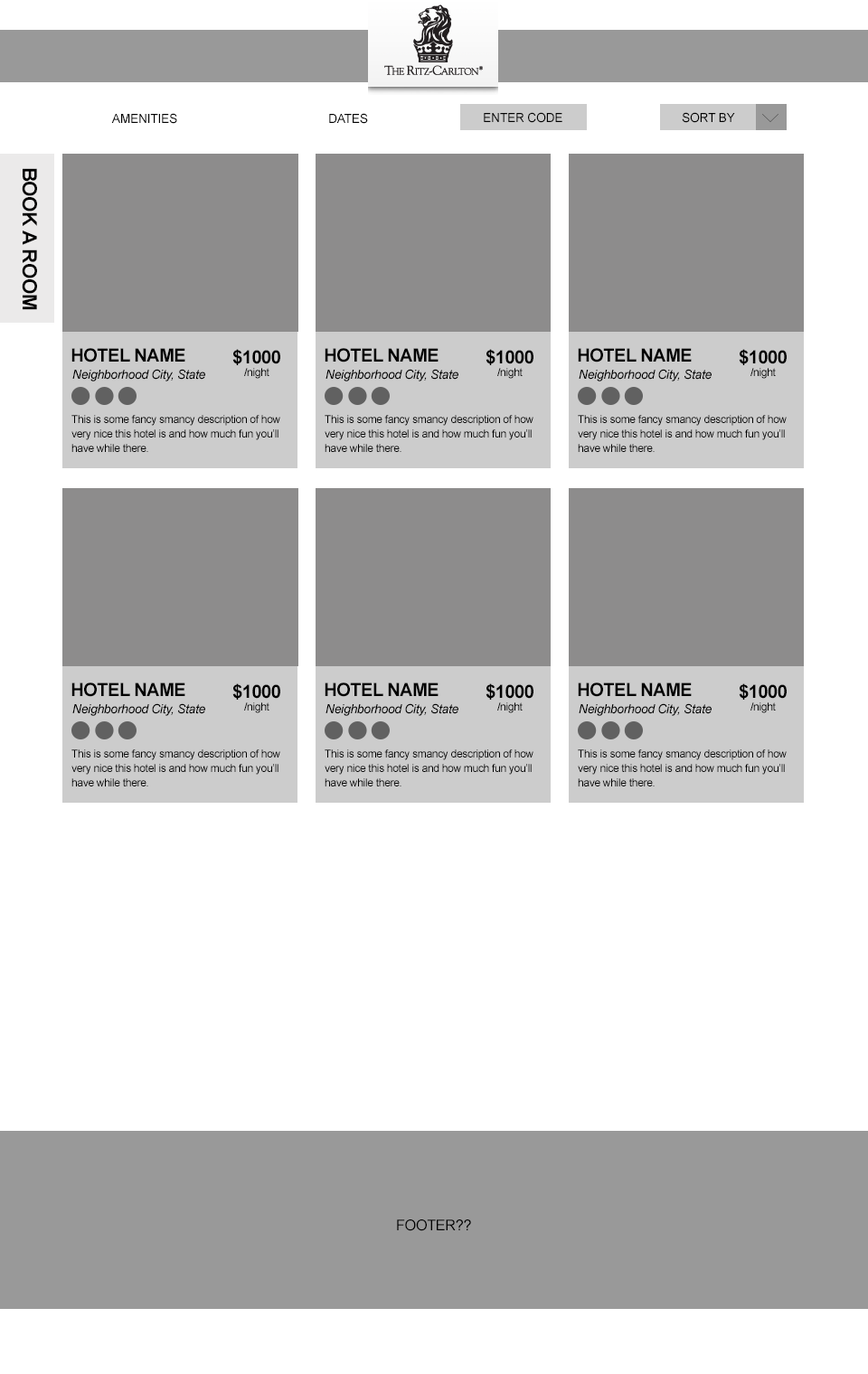
<style>
.page{position:relative;width:868px;height:1374px;background:#ffffff}
.page>*{position:absolute;margin:0}
.t1{font:12.7px "ArialMT";letter-spacing:-0.025em;color:#000000}
.t2{font:19.9px "Arial-BoldMT";letter-spacing:-0.025em;color:#010101}
.t3{font:18.1px "Arial-BoldMT";letter-spacing:-0.025em;color:#000000}
.t4{font:12.7px "Arial-ItalicMT";letter-spacing:-0.025em;color:#000000}
.t5{font:10.8px "ArialMT";letter-spacing:-0.025em;color:#000000}
.t6{font:10.8px/14.8px "ArialMT";letter-spacing:-0.025em;color:#000000}
.t7{font:14.8px "ArialMT";letter-spacing:-0.025em;color:#000000}
</style>
<div class="page">
<p class="t1" style="left:111px;top:113px;width:66px;height:11px">AMENITIES</p>
<p class="t1" style="left:329px;top:113px;width:39px;height:11px">DATES</p>
<p class="t1" style="left:484px;top:112px;width:78px;height:11px">ENTER CODE</p>
<p class="t1" style="left:682px;top:112px;width:53px;height:11px">SORT BY</p>
<p class="t2" style="left:22px;top:168px;width:15px;height:142px;rotate:90deg">BOOK A ROOM</p>
<p class="t3" style="left:71px;top:348px;width:114px;height:14px">HOTEL NAME</p>
<p class="t3" style="left:232px;top:349px;width:48px;height:16px">$1000</p>
<p class="t3" style="left:325px;top:348px;width:113px;height:14px">HOTEL NAME</p>
<p class="t3" style="left:485px;top:349px;width:48px;height:16px">$1000</p>
<p class="t3" style="left:578px;top:348px;width:114px;height:14px">HOTEL NAME</p>
<p class="t3" style="left:739px;top:349px;width:47px;height:16px">$1000</p>
<p class="t4" style="left:72px;top:369px;width:133px;height:12px">Neighborhood City, State</p>
<p class="t5" style="left:244px;top:368px;width:25px;height:11px">/night</p>
<p class="t4" style="left:325px;top:369px;width:133px;height:12px">Neighborhood City, State</p>
<p class="t5" style="left:497px;top:368px;width:26px;height:11px">/night</p>
<p class="t4" style="left:579px;top:369px;width:132px;height:12px">Neighborhood City, State</p>
<p class="t5" style="left:750px;top:368px;width:26px;height:11px">/night</p>
<p class="t6" style="left:71px;top:415px;width:209px;height:37px">This is some fancy smancy description of how very nice this hotel is and how much fun you’ll have while there.</p>
<p class="t6" style="left:325px;top:415px;width:208px;height:37px">This is some fancy smancy description of how very nice this hotel is and how much fun you’ll have while there.</p>
<p class="t6" style="left:578px;top:415px;width:208px;height:37px">This is some fancy smancy description of how very nice this hotel is and how much fun you’ll have while there.</p>
<p class="t3" style="left:71px;top:683px;width:114px;height:14px">HOTEL NAME</p>
<p class="t3" style="left:232px;top:683px;width:48px;height:17px">$1000</p>
<p class="t3" style="left:325px;top:683px;width:113px;height:14px">HOTEL NAME</p>
<p class="t3" style="left:485px;top:683px;width:48px;height:17px">$1000</p>
<p class="t3" style="left:578px;top:683px;width:114px;height:14px">HOTEL NAME</p>
<p class="t3" style="left:739px;top:683px;width:47px;height:17px">$1000</p>
<p class="t4" style="left:72px;top:703px;width:133px;height:13px">Neighborhood City, State</p>
<p class="t5" style="left:244px;top:702px;width:25px;height:11px">/night</p>
<p class="t4" style="left:325px;top:703px;width:133px;height:13px">Neighborhood City, State</p>
<p class="t5" style="left:497px;top:702px;width:26px;height:11px">/night</p>
<p class="t4" style="left:579px;top:703px;width:132px;height:13px">Neighborhood City, State</p>
<p class="t5" style="left:750px;top:702px;width:26px;height:11px">/night</p>
<p class="t6" style="left:71px;top:749px;width:209px;height:37px">This is some fancy smancy description of how very nice this hotel is and how much fun you’ll have while there.</p>
<p class="t6" style="left:325px;top:749px;width:208px;height:37px">This is some fancy smancy description of how very nice this hotel is and how much fun you’ll have while there.</p>
<p class="t6" style="left:578px;top:749px;width:208px;height:37px">This is some fancy smancy description of how very nice this hotel is and how much fun you’ll have while there.</p>
<p class="t7" style="left:397px;top:1219px;width:74px;height:12px">FOOTER??</p>
</div>
